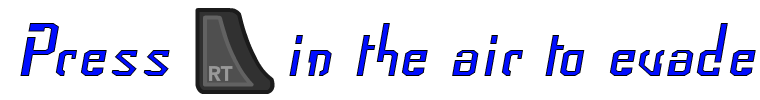
<style>
.page{position:relative;width:760px;height:100px;background:#ffffff}
.page>*{position:absolute;margin:0}
.t1{font:72px "Frak-Regular";color:#000dff}
.t2{font:72px "Frak-Regular"}
</style>
<div class="page">
<p class="t1" style="left:20px;top:23px;width:150px;height:53px">Press</p>
<p class="t2" style="left:289px;top:23px;width:467px;height:53px">in the air to evade</p>
</div>
